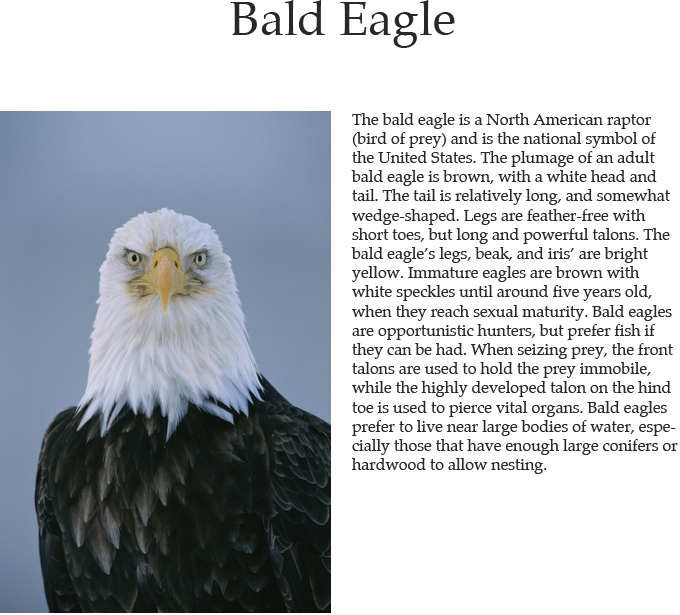
<style>
.page{position:relative;width:680px;height:615px;background:#ffffff}
.page>*{position:absolute;margin:0}
.t1{font:48px "Palatino-Roman";color:#292827}
.t2{font:16px "Palatino-Roman";color:#292827}
</style>
<div class="page">
<p class="t1" style="left:230px;top:0px;width:225px;height:48px">Bald Eagle</p>
<p class="t2" style="left:351px;top:113px;width:327px;height:361px">The bald eagle is a North American raptor (bird of prey) and is the national symbol of the United States. The plumage of an adult bald eagle is brown, with a white head and tail. The tail is relatively long, and somewhat wedge-shaped. Legs are feather-free with short toes, but long and powerful talons. The bald eagle’s legs, beak, and iris’ are bright yellow. Immature eagles are brown with white speckles until around five years old, when they reach sexual maturity. Bald eagles are opportunistic hunters, but prefer fish if they can be had. When seizing prey, the front talons are used to hold the prey immobile, while the highly developed talon on the hind toe is used to pierce vital organs. Bald eagles prefer to live near large bodies of water, especially those that have enough large conifers or hardwood to allow nesting.</p>
</div>
